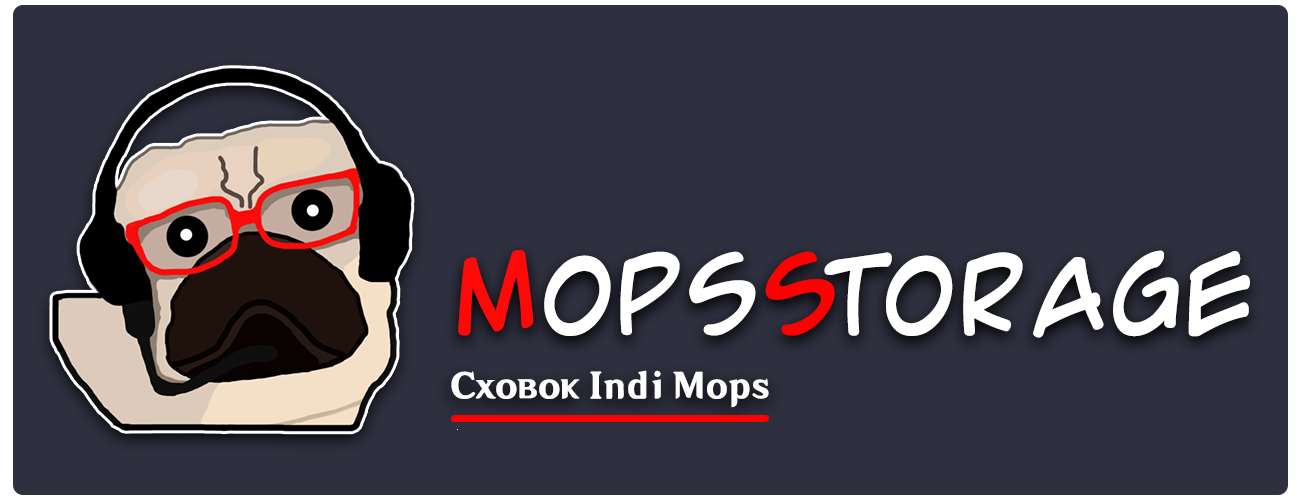
<style>
.page{position:relative;width:1300px;height:500px;background:#2e303f}
.page>*{position:absolute;margin:0}
.t1{font:113.7px "v_ComicGeek";color:#ffffff}
.t2{font:113.7px "v_ComicGeek";color:#fe0808}
.t3{font:113.7px "v_ComicGeek";color:#ff0000}
.t4{font:33.6px "SDK_SC_Web-85W";color:#ffffff}
</style>
<div class="page">
<p class="t1" style="left:458px;top:250px;width:792px;height:88px"><span class="t2">M</span>ops<span class="t3">S</span>torage</p>
<p class="t4" style="left:451px;top:370px;width:318px;height:38px">Сховок Indi Mops</p>
</div>
